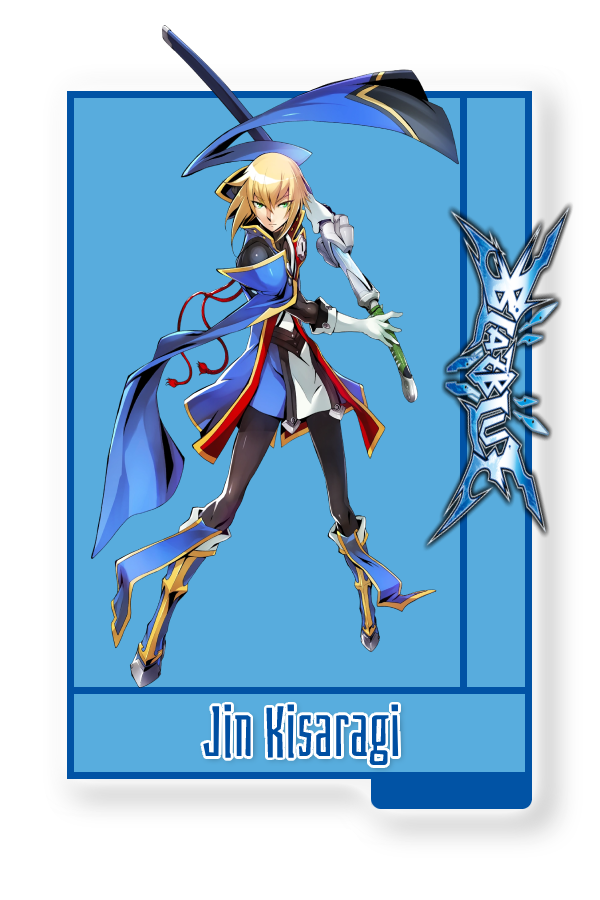
<style>
.page{position:relative;width:600px;height:900px;background:#58acdd}
.page>*{position:absolute;margin:0}
.t1{font:70px "Bahianita-Regular";color:#004fa2}
</style>
<div class="page">
<p class="t1" style="left:203px;top:704px;width:196px;height:62px">Jin Kisaragi</p>
</div>
